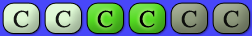
<style>
.page{position:relative;width:252px;height:36px}
.page>*{position:absolute;margin:0}
.t1{font:24px "OpusChords";color:#000000}
</style>
<div class="page">
<p class="t1" style="left:13px;top:10px;width:16px;height:18px;opacity:0.9">C</p>
<p class="t1" style="left:55px;top:10px;width:16px;height:18px;opacity:0.9">C</p>
<p class="t1" style="left:97px;top:10px;width:16px;height:18px">C</p>
<p class="t1" style="left:139px;top:10px;width:16px;height:18px">C</p>
<p class="t1" style="left:181px;top:10px;width:16px;height:18px;opacity:0.9">C</p>
<p class="t1" style="left:223px;top:10px;width:16px;height:18px;opacity:0.9">C</p>
</div>
